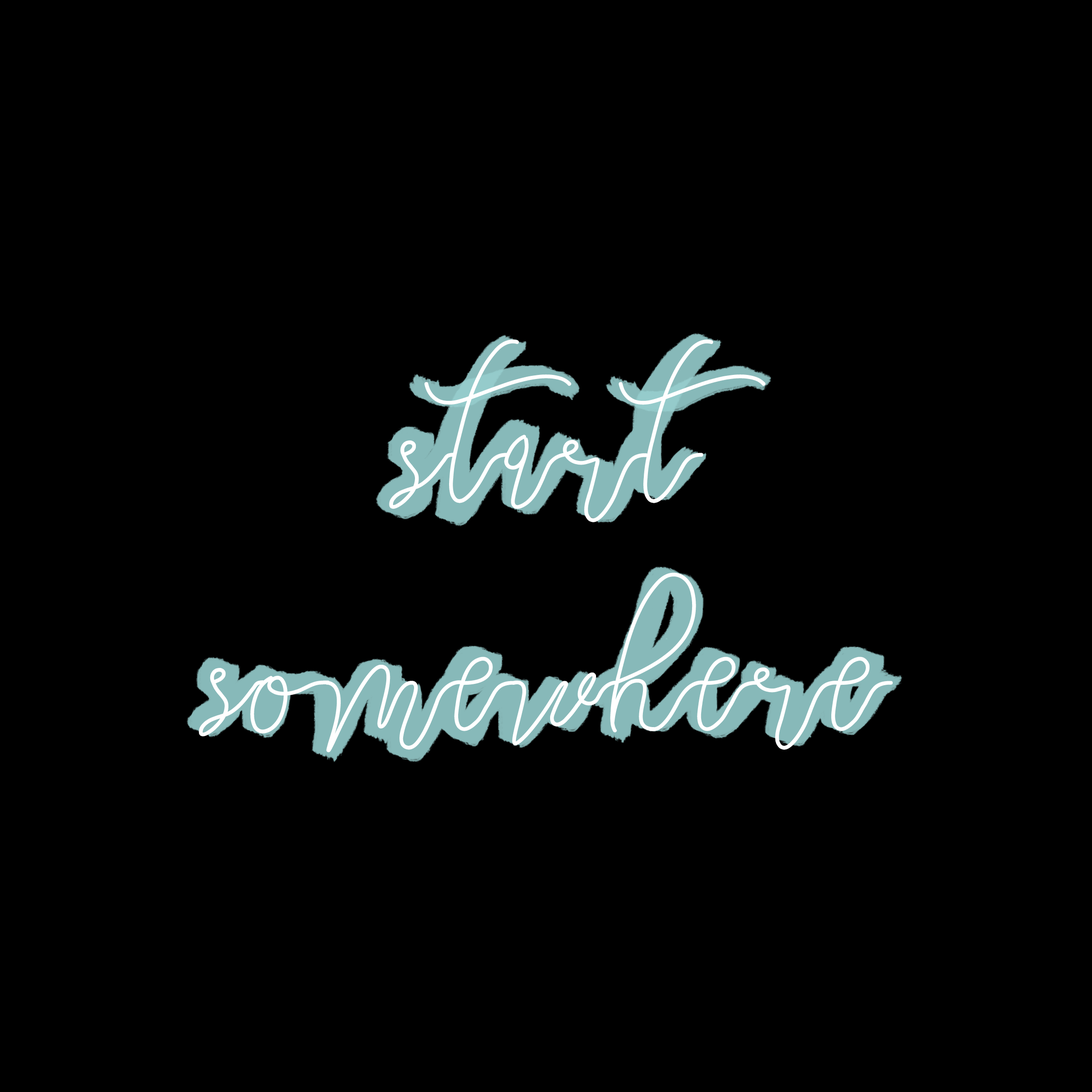
<style>
.page{position:relative;width:1092px;height:1092px;background:#000000}
.page>*{position:absolute;margin:0}
.t1{font:132.7px/227.5px "Eastpine";color:#ffffff}
</style>
<div class="page">
<p class="t1" style="left:199px;top:339px;width:694px;height:414px;text-align:center">start<br>somewhere</p>
</div>
